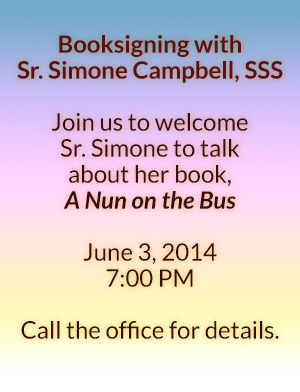
<style>
.page{position:relative;width:300px;height:392px}
.page>*{position:absolute;margin:0}
.t1{font:24px/26px "Lato-Regular";color:#390b0b}
.t2{font:24px/26px "Lato-Bold";color:#610e0e}
.t3{font:24px/26px "Lato-BoldItalic";color:#390b0b}
</style>
<div class="page">
<p class="t1" style="left:17px;top:35px;width:266px;height:304px;text-align:center"><span class="t2">Booksigning with <br>Sr. Simone Campbell, SSS<br><br></span>Join us to welcome <br>Sr. Simone to talk <br>about her book, <br><span class="t3">A Nun on the Bus</span> <br><br>June 3, 2014<br>7:00 PM<br><br>Call the office for details.</p>
</div>
